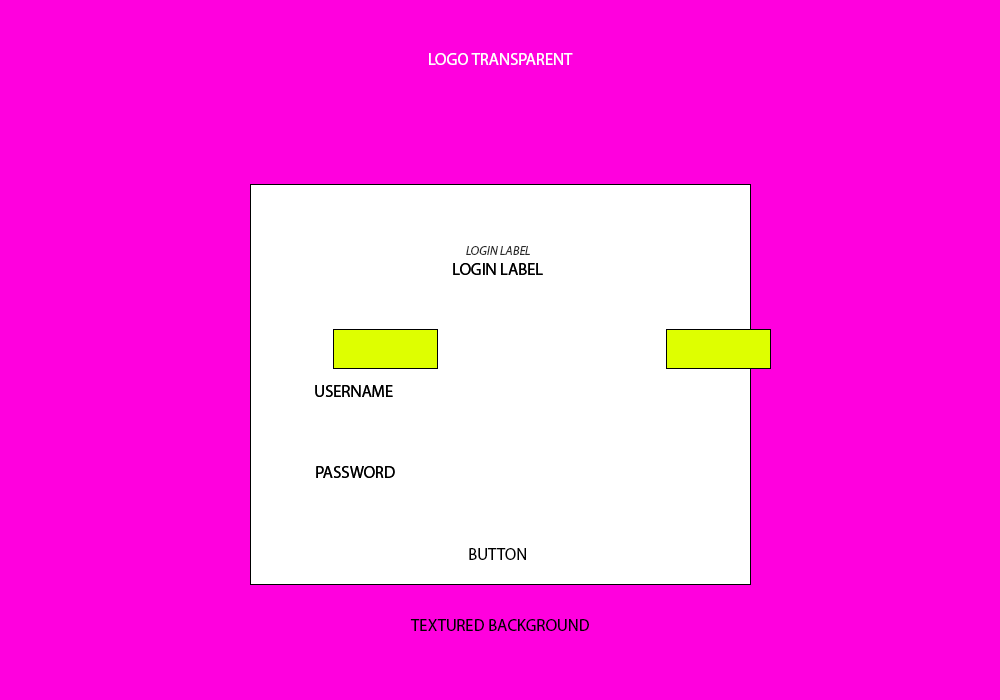
<style>
.page{position:relative;width:1000px;height:700px;background:#ff00de}
.page>*{position:absolute;margin:0}
.t1{font:16.7px "MyriadPro-Regular";color:#ffffff;text-transform:uppercase}
.t2{font:12.5px "MyriadPro-It";color:#2a2a2a;text-transform:uppercase}
.t3{font:16.7px "MyriadPro-Regular";color:#000000;text-transform:uppercase}
</style>
<div class="page">
<p class="t1" style="left:429px;top:53px;width:144px;height:12px">Logo transparent</p>
<p class="t2" style="left:466px;top:246px;width:64px;height:9px">Login label</p>
<p class="t3" style="left:453px;top:263px;width:90px;height:12px">Login label</p>
<p class="t3" style="left:453px;top:263px;width:90px;height:12px">Login label</p>
<p class="t3" style="left:315px;top:385px;width:78px;height:12px">username</p>
<p class="t3" style="left:315px;top:385px;width:78px;height:12px">username</p>
<p class="t3" style="left:316px;top:466px;width:79px;height:12px">password</p>
<p class="t3" style="left:316px;top:466px;width:79px;height:12px">password</p>
<p class="t3" style="left:469px;top:548px;width:57px;height:12px">Button</p>
<p class="t3" style="left:410px;top:619px;width:179px;height:12px">Textured Background</p>
</div>
